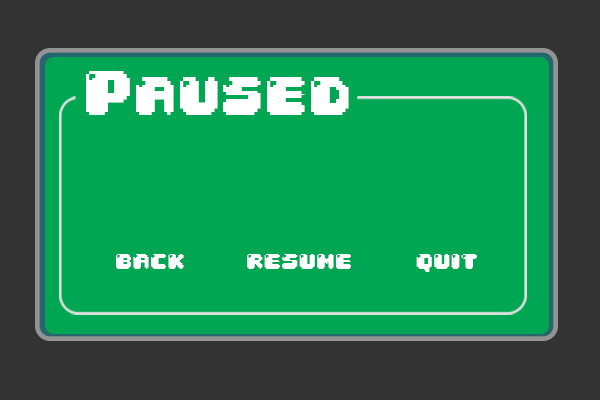
<style>
.page{position:relative;width:600px;height:400px;background:#00a651}
.page>*{position:absolute;margin:0}
.t1{font:53.1px "04b30";color:#ffffff}
.t2{font:21.3px "04b30";color:#ffffff}
</style>
<div class="page">
<p class="t1" style="left:86px;top:71px;width:263px;height:44px">Paused</p>
<p class="t2" style="left:116px;top:254px;width:68px;height:15px">back</p>
<p class="t2" style="left:247px;top:254px;width:104px;height:15px">resume</p>
<p class="t2" style="left:416px;top:254px;width:61px;height:18px">quit</p>
</div>
